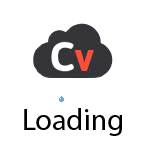
<style>
.page{position:relative;width:150px;height:150px;background:#ffffff}
.page>*{position:absolute;margin:0}
.t1{font:30px "MyriadPro-Regular";color:#000000}
</style>
<div class="page">
<p class="t1" style="left:24px;top:108px;width:98px;height:28px">Loading</p>
</div>
